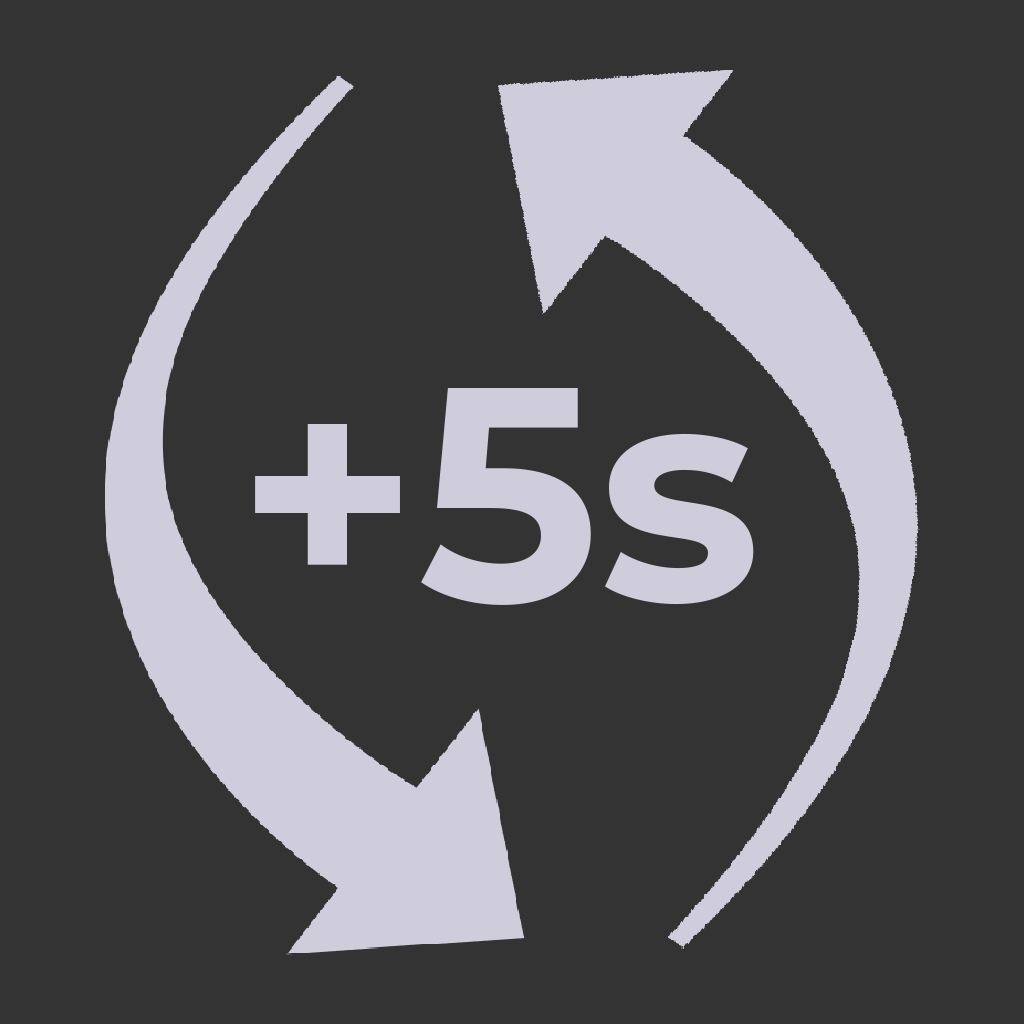
<style>
.page{position:relative;width:1024px;height:1024px;background:#333333}
.page>*{position:absolute;margin:0}
.t1{font:304.1px "Montserrat-Bold";color:#cfccdb}
</style>
<div class="page">
<p class="t1" style="left:255px;top:388px;width:499px;height:217px">+5s</p>
</div>
